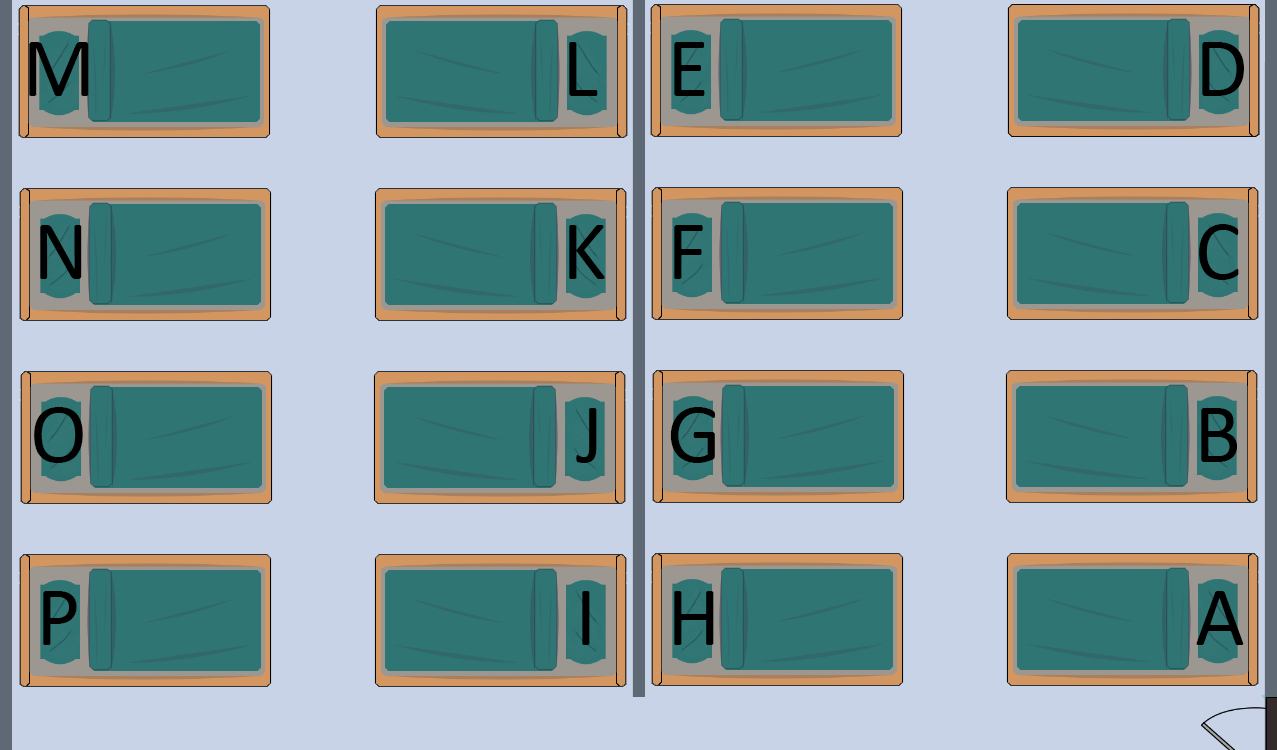
<style>
.page{position:relative;width:1277px;height:750px;background:#c8d3e7}
.page>*{position:absolute;margin:0}
.t1{font:85.5px "Calibri";color:#000000}
</style>
<div class="page">
<p class="t1" style="left:29px;top:42px;width:60px;height:54px">M</p>
<p class="t1" style="left:569px;top:42px;width:29px;height:54px">L</p>
<p class="t1" style="left:674px;top:42px;width:31px;height:54px">E</p>
<p class="t1" style="left:1202px;top:42px;width:42px;height:54px">D</p>
<p class="t1" style="left:40px;top:225px;width:42px;height:54px">N</p>
<p class="t1" style="left:569px;top:225px;width:36px;height:54px">K</p>
<p class="t1" style="left:674px;top:225px;width:29px;height:54px">F</p>
<p class="t1" style="left:1199px;top:224px;width:40px;height:56px">C</p>
<p class="t1" style="left:34px;top:407px;width:49px;height:56px">O</p>
<p class="t1" style="left:576px;top:408px;width:21px;height:55px">J</p>
<p class="t1" style="left:670px;top:407px;width:45px;height:56px">G</p>
<p class="t1" style="left:1201px;top:408px;width:36px;height:54px">B</p>
<p class="t1" style="left:43px;top:591px;width:34px;height:54px">P</p>
<p class="t1" style="left:582px;top:591px;width:8px;height:54px">I</p>
<p class="t1" style="left:674px;top:591px;width:40px;height:54px">H</p>
<p class="t1" style="left:1196px;top:591px;width:48px;height:54px">A</p>
</div>
